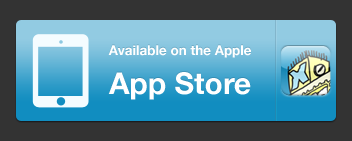
<style>
.page{position:relative;width:352px;height:141px;background:#333333}
.page>*{position:absolute;margin:0}
.t1{font:13.5px "HelveticaNeue-Bold";color:#ffffff}
.t2{font:30px "HelveticaNeue-Bold";color:#ffffff}
</style>
<div class="page">
<p class="t1" style="left:108px;top:45px;width:143px;height:13px">Available on the Apple</p>
<p class="t2" style="left:108px;top:72px;width:143px;height:28px">App Store</p>
</div>
